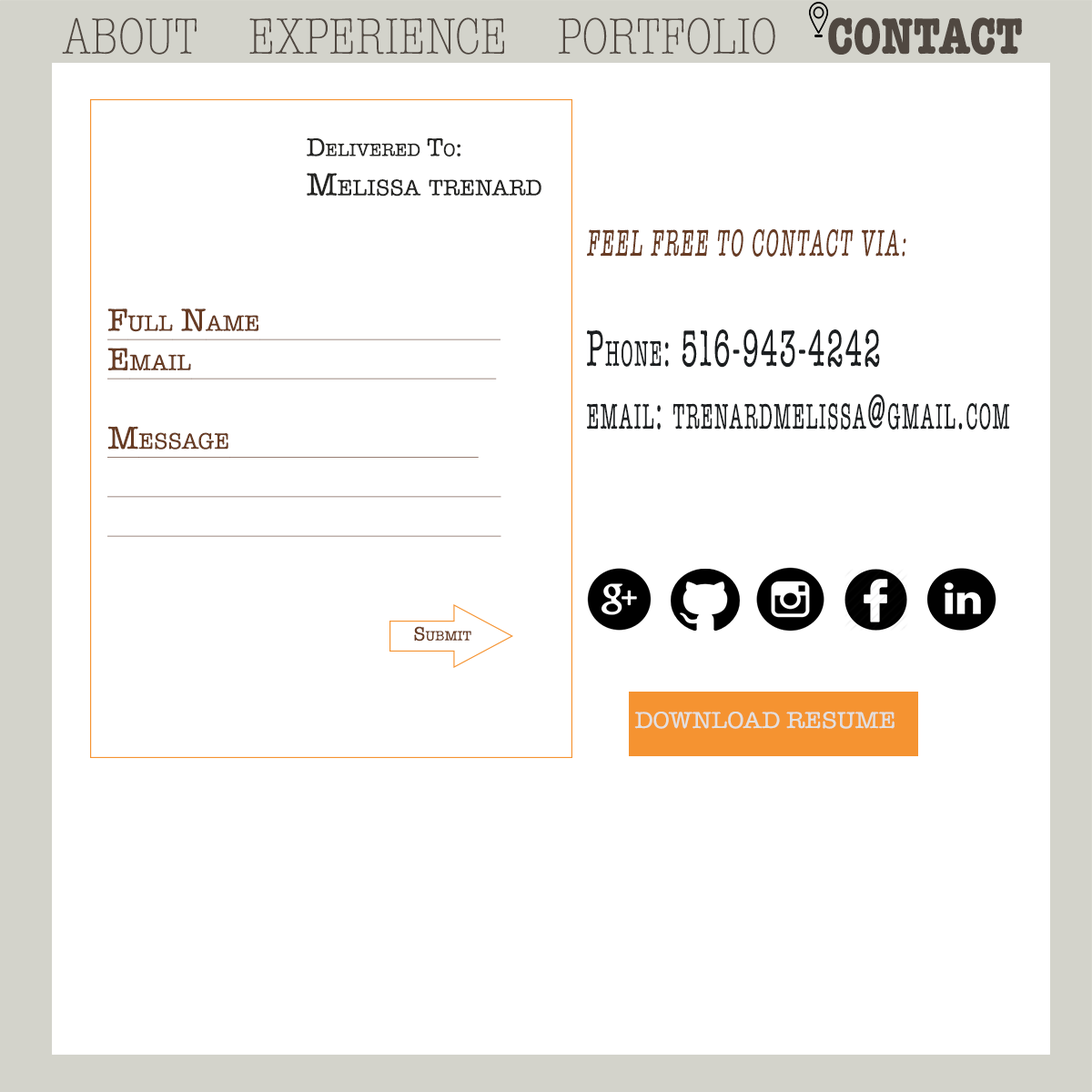
<style>
.page{position:relative;width:1092px;height:1092px;background:#ffffff}
.page>*{position:absolute;margin:0}
.t1{font:52.4px "AmericanTypewriter-CondensedLight";letter-spacing:-0.005em;color:#504841;text-transform:uppercase}
.t2{font:52.4px "AmericanTypewriter-CondensedLight";letter-spacing:-0.005em;color:#504841}
.t3{font:52.4px "AmericanTypewriter-CondensedBold";letter-spacing:-0.005em;color:#504841;text-transform:uppercase}
.t4{font:32.8px "AmericanTypewriter";letter-spacing:-0.005em;color:#252523;font-variant:small-caps}
.t5{font:26.2px "AmericanTypewriter";letter-spacing:-0.005em;color:#252523;font-variant:small-caps}
.t6{font:52.4px "AmericanTypewriter";letter-spacing:0.075em;color:#1c1f21;font-variant:small-caps;scale:0.5 1}
.t7{font:38.2px "AmericanTypewriter";letter-spacing:0.1em;color:#683c24;text-transform:uppercase;font-style:italic;scale:0.5 1}
.t8{font:32.8px "AmericanTypewriter";letter-spacing:-0.005em;color:#683c24;font-variant:small-caps;text-decoration:underline}
.t9{font:19.7px "AmericanTypewriter";letter-spacing:-0.005em;color:#683c24;font-variant:small-caps}
.t10{font:23.7px "AmericanTypewriter";letter-spacing:-0.005em;color:#e2dfde;font-variant:small-caps;scale:1.07 1}
</style>
<div class="page">
<p class="t1" style="left:62px;top:17px;width:960px;height:38px"><span class="t2">ABOUT</span>    Experience    Portfolio    <span class="t3">Contact</span></p>
<p class="t4" style="left:307px;top:138px;width:234px;height:59px"><span class="t5">Delivered To:<br></span>Melissa trenard</p>
<p class="t6" style="left:587px;top:228px;width:423px;height:202px"><span class="t7">Feel free to contact via:<br><br></span>Phone: 516-943-4242<br>email: trenardmelissa@gmail.com</p>
<p class="t8" style="left:107px;top:308px;width:394px;height:229px">Full Name                              <br>Email                                      <br><br>Message</p>
<p class="t9" style="left:414px;top:626px;width:57px;height:16px">Submit</p>
<p class="t10" style="left:634px;top:712px;width:261px;height:17px">DOWNLOAD RESUME</p>
</div>
